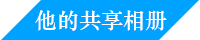
<style>
.page{position:relative;width:200px;height:40px;background:#00a2ff}
.page>*{position:absolute;margin:0}
.t1{font:22px "STZhongsong";color:#ffffff}
</style>
<div class="page">
<p class="t1" style="left:35px;top:10px;width:132px;height:21px">他的共享相册</p>
</div>
